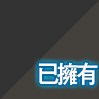
<style>
.page{position:relative;width:99px;height:99px;background:#333333}
.page>*{position:absolute;margin:0}
.t1{font:24px "GothicMB101Pr6N-Medium";letter-spacing:-0.08em;color:#fdfbf9;scale:0.9 1}
</style>
<div class="page">
<p class="t1" style="left:38px;top:62px;width:60px;height:23px">已擁有</p>
</div>
